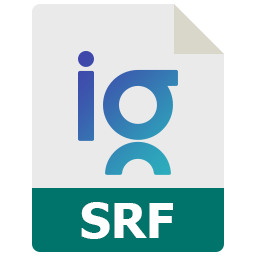
<style>
.page{position:relative;width:256px;height:256px;background:#eaeaea}
.page>*{position:absolute;margin:0}
.t1{font:48px "Tahoma-Bold";color:#ffffff}
</style>
<div class="page">
<p class="t1" style="left:81px;top:202px;width:92px;height:37px">SRF</p>
</div>
